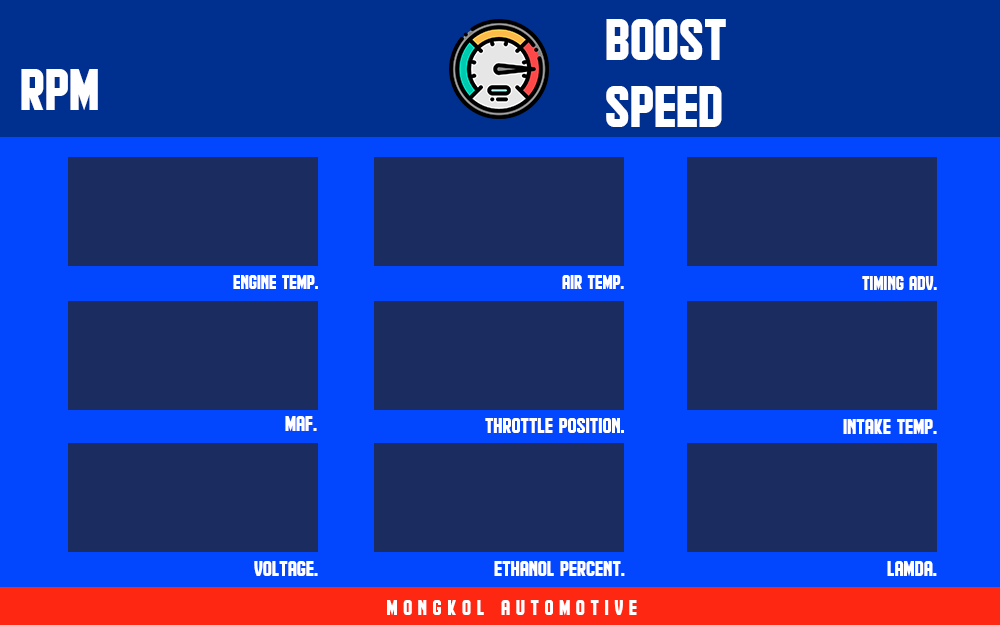
<style>
.page{position:relative;width:1000px;height:625px;background:#1b2c60}
.page>*{position:absolute;margin:0}
.t1{font:60px "Hindenburg-Regular";color:#ffffff}
.t2{font:20px "Hindenburg-Regular";color:#ffffff}
.t3{font:22px "Hindenburg-Regular";color:#ffffff}
</style>
<div class="page">
<p class="t1" style="left:606px;top:19px;width:120px;height:41px">BOOST</p>
<p class="t1" style="left:21px;top:69px;width:77px;height:41px">RPM</p>
<p class="t1" style="left:606px;top:86px;width:116px;height:41px">SPEED</p>
<p class="t2" style="left:233px;top:275px;width:85px;height:14px">ENGINE TEMP.</p>
<p class="t2" style="left:562px;top:275px;width:62px;height:14px">AIR TEMP.</p>
<p class="t2" style="left:862px;top:276px;width:75px;height:14px">TIMING ADV.</p>
<p class="t3" style="left:285px;top:416px;width:32px;height:15px">MAF.</p>
<p class="t3" style="left:485px;top:418px;width:139px;height:15px">THROTTLE POSITION.</p>
<p class="t3" style="left:843px;top:419px;width:94px;height:15px">INTAKE TEMP.</p>
<p class="t3" style="left:254px;top:561px;width:64px;height:15px">VOLTage.</p>
<p class="t3" style="left:494px;top:561px;width:131px;height:15px">ETHANOL PERCENT.</p>
<p class="t3" style="left:887px;top:561px;width:50px;height:15px">LAMDA.</p>
<p class="t3" style="left:387px;top:600px;width:250px;height:15px">M O N G K O L   A U T O M O T I V E</p>
</div>
